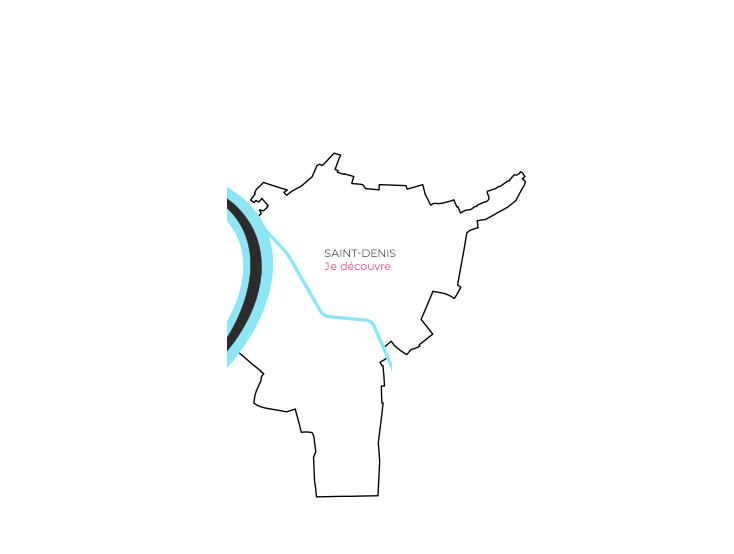
<style>
.page{position:relative;width:734px;height:554px;background:#ffffff}
.page>*{position:absolute;margin:0}
.t1{font:11px "Montserrat-Regular";text-transform:uppercase}
.t2{font:11px "Montserrat-Regular"}
</style>
<div class="page">
<p class="t1" style="left:324px;top:249px;width:72px;height:21px">Saint-Denis<br><span class="t2">Je découvre</span></p>
</div>
